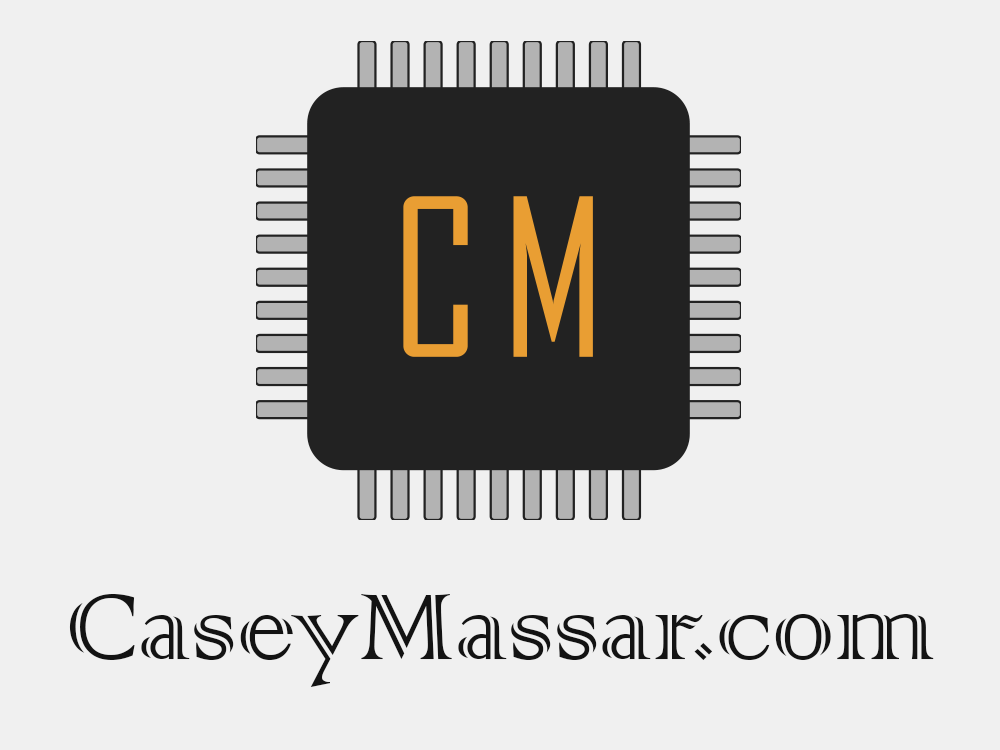
<style>
.page{position:relative;width:1000px;height:750px;background:#f0f0f0}
.page>*{position:absolute;margin:0}
.t1{font:125px "ColonnaMT";color:#131313}
</style>
<div class="page">
<p class="t1" style="left:69px;top:594px;width:865px;height:93px">CaseyMassar.com</p>
</div>
